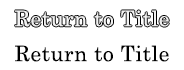
<style>
.page{position:relative;width:184px;height:70px;background:#ffffff}
.page>*{position:absolute;margin:0}
.t1{font:21.3px "CenturySchoolbook";letter-spacing:0.025em;color:#000000}
</style>
<div class="page">
<p class="t1" style="left:15px;top:45px;width:154px;height:17px">Return to Title</p>
</div>
